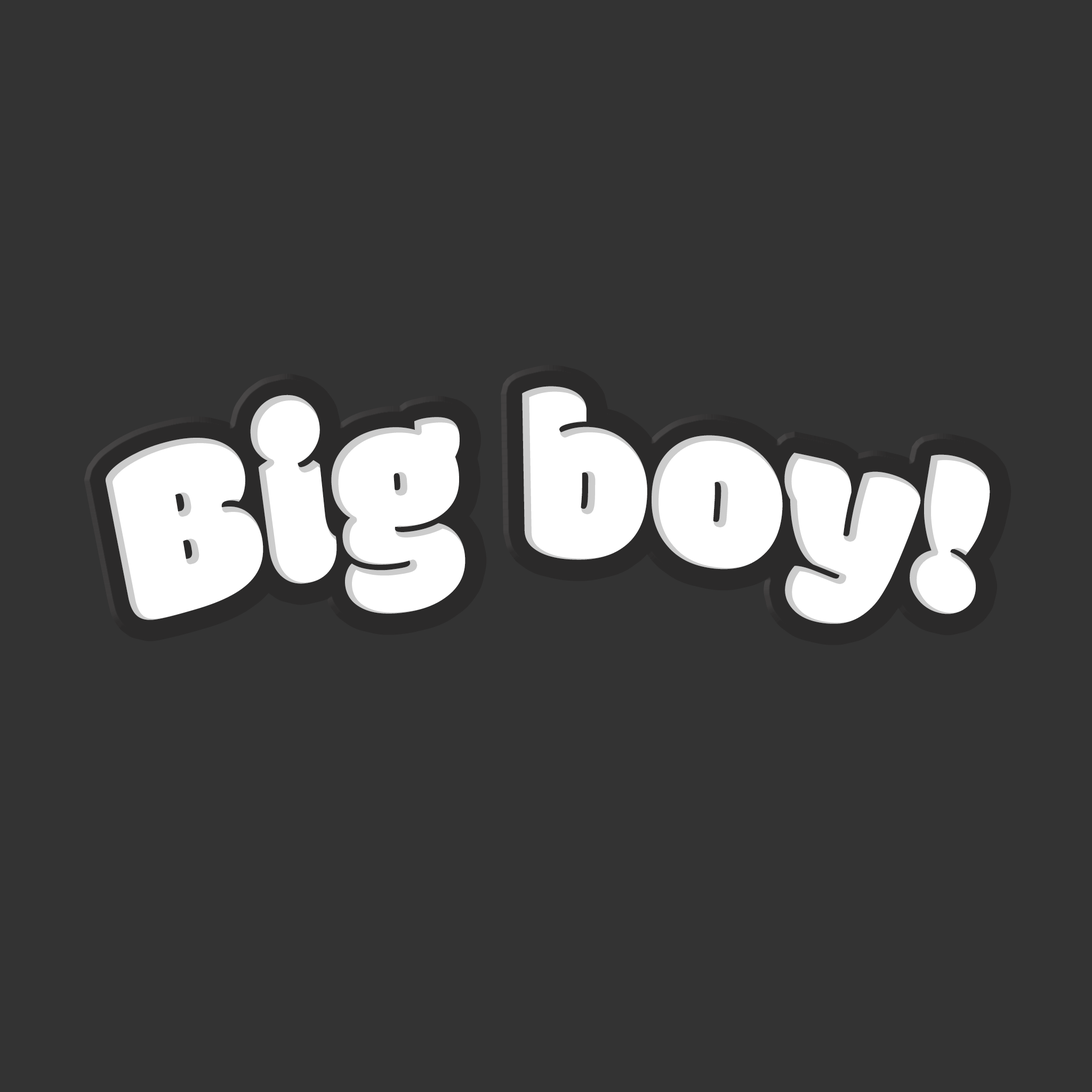
<style>
.page{position:relative;width:1092px;height:1092px;background:#333333}
.page>*{position:absolute;margin:0}
.t1{font:245.9px "Modak";color:#ffffff;scale:0.87 1}
</style>
<div class="page">
<p class="t1" style="left:106px;top:386px;width:884px;height:238px">Big boy!</p>
</div>
